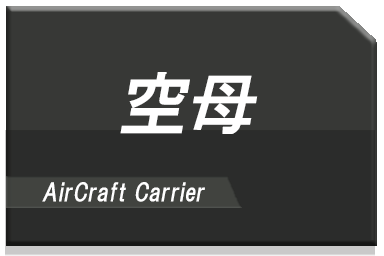
<style>
.page{position:relative;width:384px;height:256px;background:#373836}
.page>*{position:absolute;margin:0}
.t1{font:68px "HGPGothicE";color:#ffffff;font-style:italic}
.t2{font:24px "HGPGothicE";color:#ffffff;font-style:italic}
</style>
<div class="page">
<p class="t1" style="left:120px;top:72px;width:138px;height:62px">空母</p>
<p class="t2" style="left:42px;top:182px;width:163px;height:20px">AirCraft Carrier</p>
</div>
